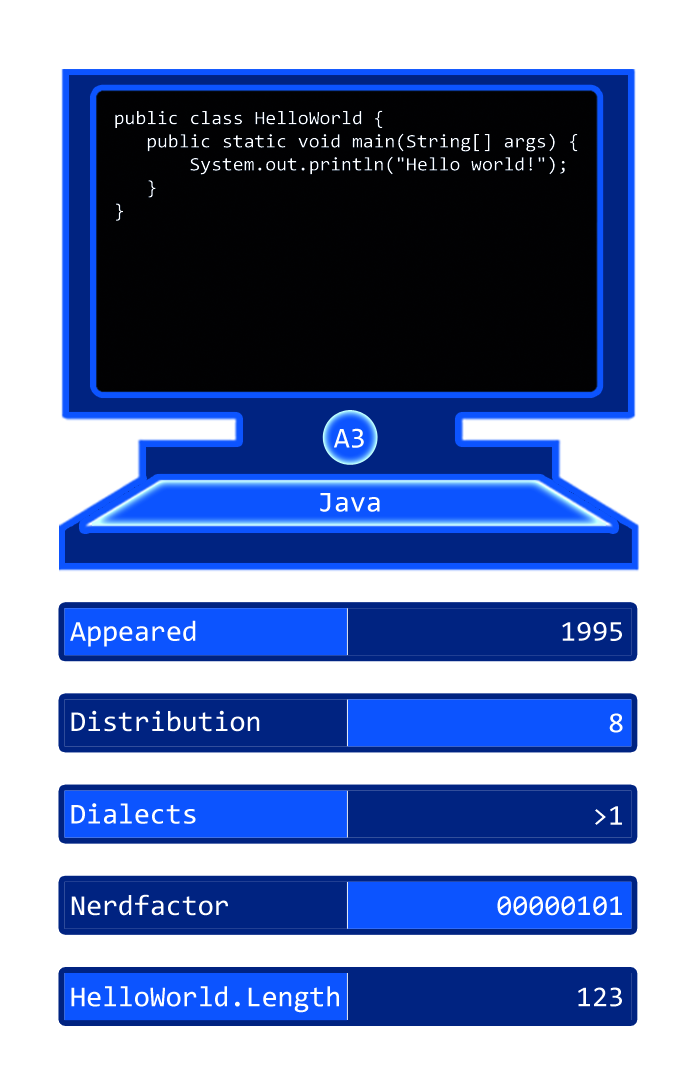
<style>
.page{position:relative;width:697px;height:1087px;background:#ffffff}
.page>*{position:absolute;margin:0}
.t1{font:19.3px "Consolas";color:#ffffff}
.t2{font:29px "Consolas";color:#ffffff}
</style>
<div class="page">
<p class="t1" style="left:115px;top:110px;width:463px;height:111px">public class HelloWorld {<br>   public static void main(String[] args) {<br>       System.out.println("Hello world!");<br>   }<br>}</p>
<p class="t2" style="left:334px;top:428px;width:30px;height:20px">A3</p>
<p class="t2" style="left:320px;top:493px;width:60px;height:19px">Java</p>
<p class="t2" style="left:70px;top:620px;width:126px;height:27px">Appeared</p>
<p class="t2" style="left:562px;top:622px;width:60px;height:19px">1995</p>
<p class="t2" style="left:71px;top:710px;width:189px;height:22px">Distribution</p>
<p class="t2" style="left:609px;top:713px;width:14px;height:20px">8</p>
<p class="t2" style="left:71px;top:803px;width:125px;height:21px">Dialects</p>
<p class="t2" style="left:595px;top:806px;width:27px;height:19px">&gt;1</p>
<p class="t2" style="left:71px;top:894px;width:157px;height:22px">Nerdfactor</p>
<p class="t2" style="left:497px;top:896px;width:125px;height:20px">00000101</p>
<p class="t2" style="left:71px;top:986px;width:268px;height:27px">HelloWorld.Length</p>
<p class="t2" style="left:578px;top:987px;width:44px;height:20px">123</p>
</div>
